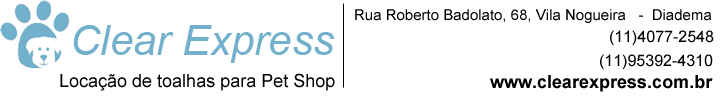
<style>
.page{position:relative;width:720px;height:100px;background:#ffffff}
.page>*{position:absolute;margin:0}
.t1{font:15px "ArialMT";color:#000000}
.t2{font:42px "Arial-ItalicMT";color:#73b0cc}
.t3{font:16px "ArialMT";color:#000000}
.t4{font:18px "ArialMT";color:#000000}
.t5{font:18px "Arial-BoldMT";color:#000000}
</style>
<div class="page">
<p class="t1" style="left:355px;top:9px;width:357px;height:14px">Rua Roberto Badolato, 68, Vila Nogueira   -  Diadema</p>
<p class="t2" style="left:73px;top:25px;width:261px;height:38px">Clear Express</p>
<p class="t3" style="left:610px;top:30px;width:104px;height:16px">(11)4077-2548</p>
<p class="t3" style="left:600px;top:54px;width:113px;height:16px">(11)95392-4310</p>
<p class="t4" style="left:60px;top:73px;width:275px;height:18px">Locação de toalhas para Pet Shop</p>
<p class="t5" style="left:490px;top:75px;width:223px;height:17px">www.clearexpress.com.br</p>
</div>
